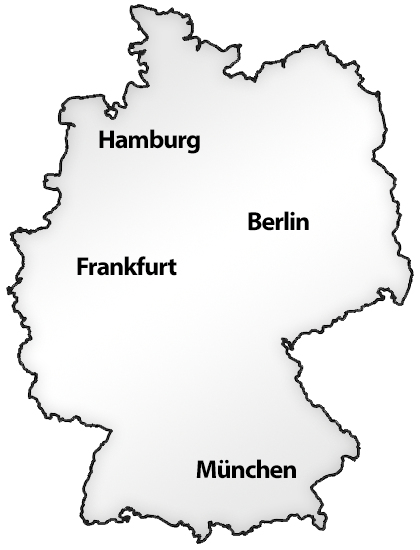
<style>
.page{position:relative;width:420px;height:550px;background:#ffffff}
.page>*{position:absolute;margin:0}
.t1{font:26px "MyriadPro-Bold";letter-spacing:-0.04em;color:#000000}
</style>
<div class="page">
<p class="t1" style="left:99px;top:129px;width:101px;height:25px">Hamburg</p>
<p class="t1" style="left:248px;top:211px;width:61px;height:20px">Berlin</p>
<p class="t1" style="left:77px;top:256px;width:100px;height:20px">Frankfurt</p>
<p class="t1" style="left:196px;top:459px;width:100px;height:20px">München</p>
</div>
